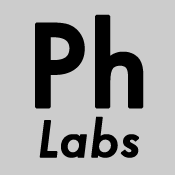
<style>
.page{position:relative;width:175px;height:175px;background:#cccccc}
.page>*{position:absolute;margin:0}
.t1{font:110px "Futura-Medium";color:#000000;font-weight:bold}
.t2{font:48px "Futura-MediumItalic";color:#000000;font-weight:bold}
</style>
<div class="page">
<p class="t1" style="left:35px;top:14px;width:109px;height:95px">Ph</p>
<p class="t2" style="left:39px;top:116px;width:100px;height:42px">Labs</p>
</div>
